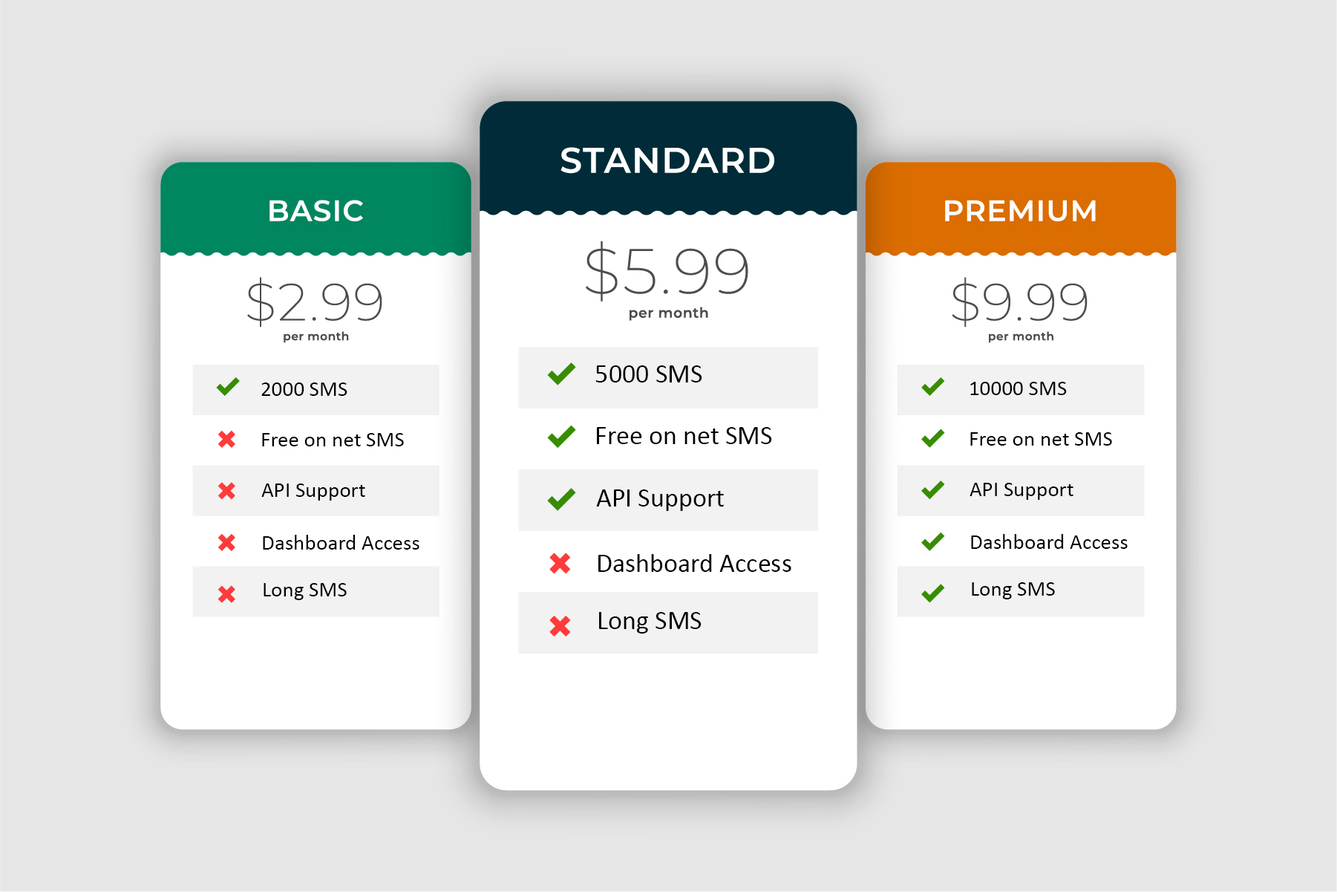
<style>
.page{position:relative;width:1337px;height:892px;background:#e6e6e6}
.page>*{position:absolute;margin:0}
.t1{font:26.7px "Calibri";color:#000000}
.t2{font:21.7px "Calibri";color:#000000}
</style>
<div class="page">
<p class="t1" style="left:595px;top:365px;width:107px;height:17px">5000 SMS</p>
<p class="t2" style="left:261px;top:382px;width:86px;height:14px">2000 SMS</p>
<p class="t2" style="left:970px;top:382px;width:97px;height:13px">10000 SMS</p>
<p class="t2" style="left:262px;top:433px;width:142px;height:13px">Free on net SMS</p>
<p class="t1" style="left:597px;top:427px;width:175px;height:17px">Free on net SMS</p>
<p class="t2" style="left:970px;top:432px;width:142px;height:13px">Free on net SMS</p>
<p class="t2" style="left:261px;top:483px;width:104px;height:17px">API Support</p>
<p class="t2" style="left:970px;top:483px;width:104px;height:17px">API Support</p>
<p class="t1" style="left:596px;top:489px;width:128px;height:22px">API Support</p>
<p class="t2" style="left:971px;top:534px;width:157px;height:15px">Dashboard Access</p>
<p class="t2" style="left:263px;top:535px;width:157px;height:14px">Dashboard Access</p>
<p class="t1" style="left:598px;top:554px;width:193px;height:18px">Dashboard Access</p>
<p class="t2" style="left:264px;top:583px;width:83px;height:17px">Long SMS</p>
<p class="t2" style="left:972px;top:582px;width:83px;height:17px">Long SMS</p>
<p class="t1" style="left:599px;top:612px;width:103px;height:21px">Long SMS</p>
</div>
